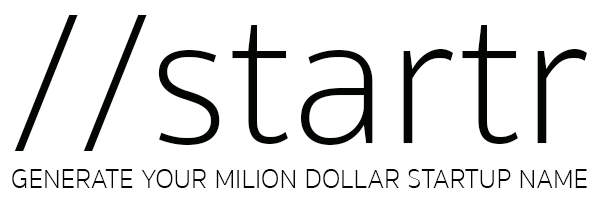
<style>
.page{position:relative;width:600px;height:205px;background:#ffffff}
.page>*{position:absolute;margin:0}
.t1{font:190px "SukhumvitSet-Thin";color:#030503}
.t2{font:27px "SukhumvitSet-Thin";color:#030503}
</style>
<div class="page">
<p class="t1" style="left:14px;top:15px;width:573px;height:136px">//startr</p>
<p class="t2" style="left:12px;top:169px;width:575px;height:19px">GENERATE YOUR MILION DOLLAR STARTUP NAME</p>
</div>
